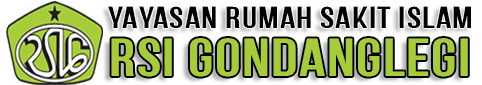
<style>
.page{position:relative;width:482px;height:85px;background:#ffffff}
.page>*{position:absolute;margin:0}
.t1{font:30.1px "BebasNeueBold";letter-spacing:0.025em;color:#030303;scale:1.27 1}
.t2{font:53.5px "BebasNeueBold";letter-spacing:0.025em;color:#a6cd39;scale:1.21 1}
</style>
<div class="page">
<p class="t1" style="left:108px;top:6px;width:363px;height:22px">YAYASAN RUMAH SAKIT ISLAM</p>
<p class="t2" style="left:111px;top:38px;width:357px;height:39px">rsi gondanglegi</p>
</div>
